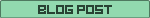
<style>
.page{position:relative;width:150px;height:18px;background:#92d9af}
.page>*{position:absolute;margin:0}
.t1{font:12px "Pixel-Art";color:#284333}
</style>
<div class="page">
<p class="t1" style="left:38px;top:5px;width:74px;height:9px">BLOG POST</p>
</div>
